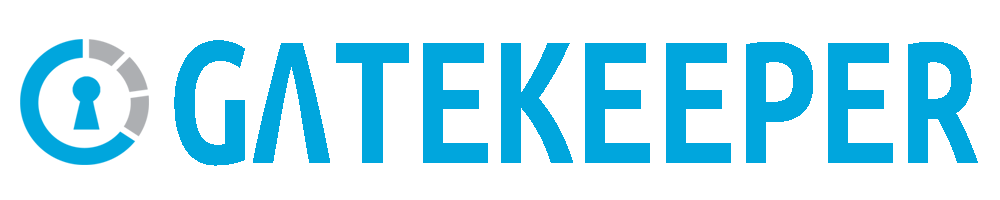
<style>
.page{position:relative;width:1000px;height:200px;background:#ffffff}
.page>*{position:absolute;margin:0}
.t1{font:194.4px "UbuntuMonoDerivativePowerline-Bold";color:#00a6dd;scale:0.83 1}
</style>
<div class="page">
<p class="t1" style="left:174px;top:40px;width:804px;height:126px">GΛTEKEEPER</p>
</div>
